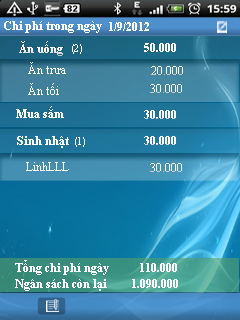
<style>
.page{position:relative;width:240px;height:320px}
.page>*{position:absolute;margin:0}
.t1{font:11.6px "TimesNewRomanPS-BoldMT";color:#ffffff}
.t2{font:11.4px "TimesNewRomanPSMT";color:#ffffff;scale:0.78 1}
.t3{font:11.6px "TimesNewRomanPSMT";color:#ffffff}
.t4{font:5.8px "TimesNewRomanPSMT";color:#ffffff}
</style>
<div class="page">
<p class="t1" style="left:4px;top:21px;width:98px;height:12px">Chi phí trong ngày</p>
<p class="t1" style="left:109px;top:22px;width:40px;height:9px">1/9/2012</p>
<p class="t1" style="left:19px;top:41px;width:44px;height:15px">Ăn uống</p>
<p class="t2" style="left:72px;top:44px;width:10px;height:10px">(2)</p>
<p class="t1" style="left:144px;top:43px;width:32px;height:9px">50.000</p>
<p class="t3" style="left:28px;top:62px;width:38px;height:12px">Ăn trưa</p>
<p class="t3" style="left:151px;top:66px;width:32px;height:9px">20.000</p>
<p class="t3" style="left:28px;top:83px;width:31px;height:12px">Ăn tối</p>
<p class="t3" style="left:150px;top:84px;width:32px;height:9px">30.000</p>
<p class="t1" style="left:16px;top:106px;width:48px;height:12px">Mua sắm</p>
<p class="t1" style="left:144px;top:110px;width:32px;height:9px">30.000</p>
<p class="t1" style="left:17px;top:136px;width:52px;height:12px">Sinh nhật</p>
<p class="t2" style="left:75px;top:137px;width:10px;height:10px">(1)</p>
<p class="t1" style="left:144px;top:136px;width:32px;height:9px">30.000</p>
<p class="t3" style="left:26px;top:162px;width:43px;height:9px"><span class="t4">             </span>     LinhLLL</p>
<p class="t3" style="left:150px;top:163px;width:32px;height:9px">30.000</p>
<p class="t1" style="left:15px;top:260px;width:162px;height:15px">Tổng chi phí ngày          110.000</p>
<p class="t1" style="left:15px;top:279px;width:163px;height:12px">Ngân sách còn lại        1.090.000</p>
</div>
